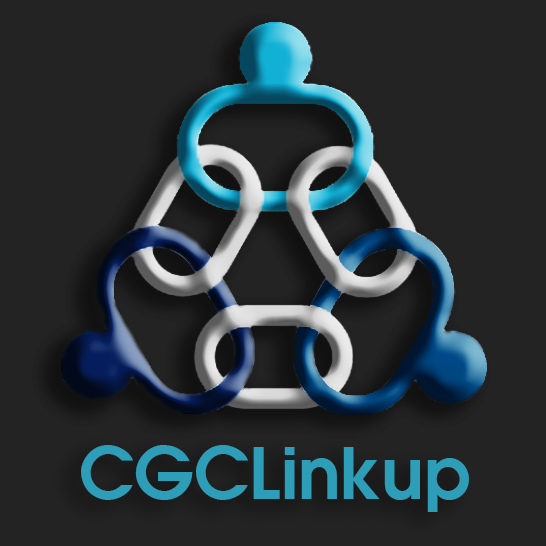
<style>
.page{position:relative;width:546px;height:546px;background:#232323}
.page>*{position:absolute;margin:0}
.t1{font:71px "AvalonBold";color:#2e9eb8}
</style>
<div class="page">
<p class="t1" style="left:81px;top:445px;width:388px;height:67px">CGCLinkup</p>
</div>
